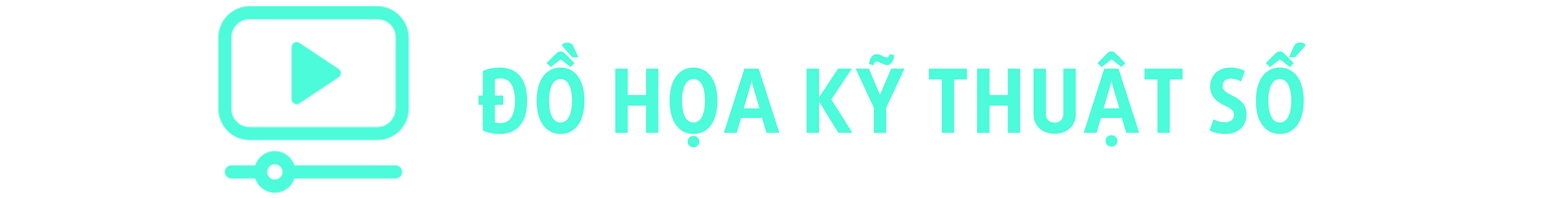
<style>
.page{position:relative;width:1568px;height:198px;background:#ffffff}
.page>*{position:absolute;margin:0}
.t1{font:88.1px "UTMDaxlineBold";color:#4cfbd9;text-transform:uppercase;font-weight:bold}
</style>
<div class="page">
<p class="t1" style="left:478px;top:43px;width:828px;height:105px">ĐỒ HỌA KỸ THUẬT SỐ</p>
</div>
